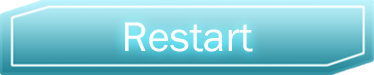
<style>
.page{position:relative;width:374px;height:75px}
.page>*{position:absolute;margin:0}
.t1{font:42.8px "FranklinGothic-Book";color:#fffefe}
</style>
<div class="page">
<p class="t1" style="left:125px;top:22px;width:128px;height:30px">Restart</p>
</div>
